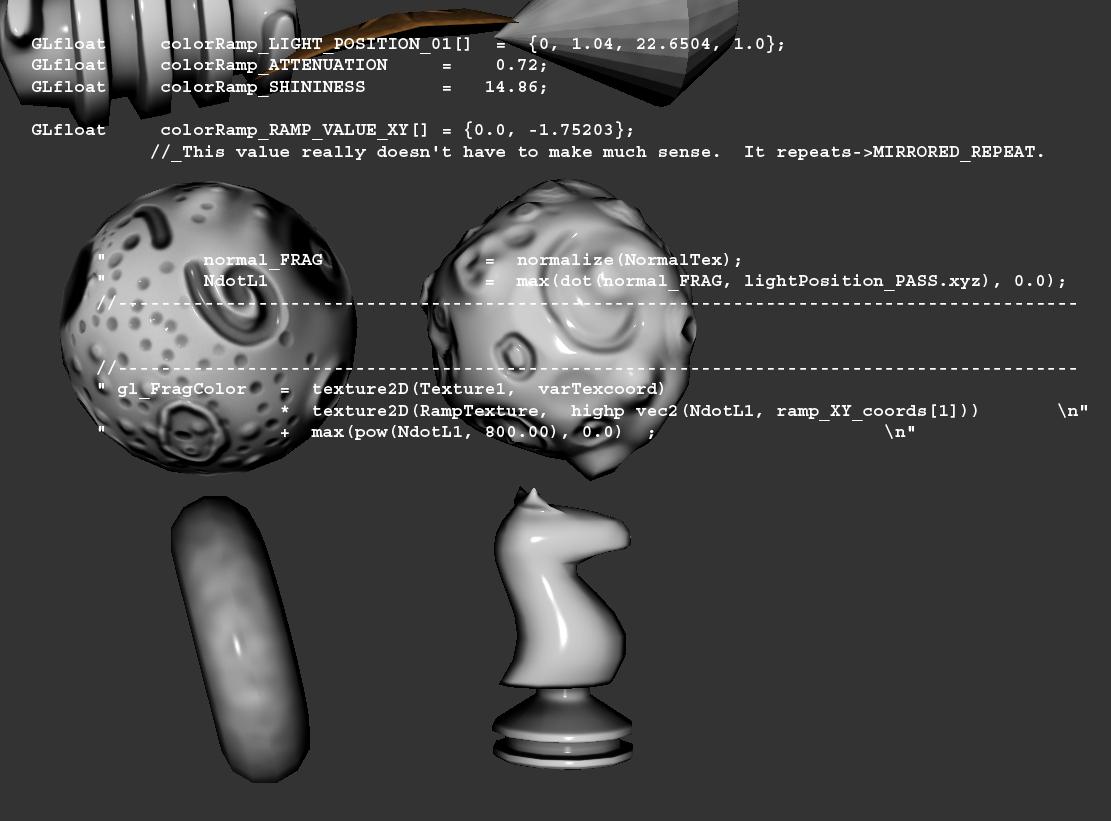
<style>
.page{position:relative;width:1111px;height:821px;background:#333333}
.page>*{position:absolute;margin:0}
.t1{font:18px "Courier-Bold";color:#ffffff}
</style>
<div class="page">
<p class="t1" style="left:32px;top:35px;width:1056px;height:405px">GLfloat     colorRamp_LIGHT_POSITION_01[]  =  {0, 1.04, 22.6504, 1.0};<br>GLfloat     colorRamp_ATTENUATION     =    0.72;<br>GLfloat     colorRamp_SHININESS       =   14.86;<br><br>GLfloat     colorRamp_RAMP_VALUE_XY[] = {0.0, -1.75203}; <br>           //_This value really doesn't have to make much sense.  It repeats-&gt;MIRRORED_REPEAT.<br><br><br><br><br>      "         normal_FRAG               =  normalize(NormalTex);                                                                  \n"                       <br>      "         NdotL1                    =  max(dot(normal_FRAG, lightPosition_PASS.xyz), 0.0);                                    \n"                       <br>      //-----------------------------------------------------------------------------------------<br><br><br>      //-----------------------------------------------------------------------------------------        <br>      " gl_FragColor   =  texture2D(Texture1,  varTexcoord) <br>                       *  texture2D(RampTexture,  highp vec2(NdotL1, ramp_XY_coords[1]))       \n"    <br>      "                +  max(pow(NdotL1, 800.00), 0.0)  ;                     \n"</p>
</div>
